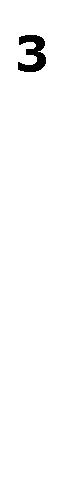
<style>
.page{position:relative;width:64px;height:500px;background:#ffffff}
.page>*{position:absolute;margin:0}
.t1{font:48px "Verdana-Bold";color:#000000}
</style>
<div class="page">
<p class="t1" style="left:18px;top:35px;width:28px;height:37px">3</p>
</div>
